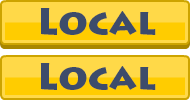
<style>
.page{position:relative;width:190px;height:100px;background:#ffd948}
.page>*{position:absolute;margin:0}
.t1{font:36px "LithosPro-Black";color:#3d4c6b}
</style>
<div class="page">
<p class="t1" style="left:40px;top:8px;width:116px;height:27px">Local</p>
<p class="t1" style="left:40px;top:63px;width:116px;height:27px">Local</p>
</div>
